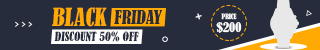
<style>
.page{position:relative;width:320px;height:50px;background:#262c3c}
.page>*{position:absolute;margin:0}
.t1{font:23.3px "BernardMT-Condensed";color:#ffa903}
.t2{font:17.7px "BernardMT-Condensed";color:#262c3c}
.t3{font:6.8px "BernardMT-Condensed";color:#ffffff}
.t4{font:12.5px "BernardMT-Condensed";color:#ffffff}
.t5{font:11.8px "BernardMT-Condensed";color:#262c3c}
</style>
<div class="page">
<p class="t1" style="left:52px;top:7px;width:55px;height:20px">BLACK</p>
<p class="t2" style="left:114px;top:10px;width:48px;height:14px">FRIDAY</p>
<p class="t3" style="left:221px;top:13px;width:16px;height:7px">PRICE</p>
<p class="t4" style="left:216px;top:22px;width:26px;height:11px">$200</p>
<p class="t5" style="left:54px;top:31px;width:85px;height:11px">DISCOUNT 50% OFF</p>
</div>
